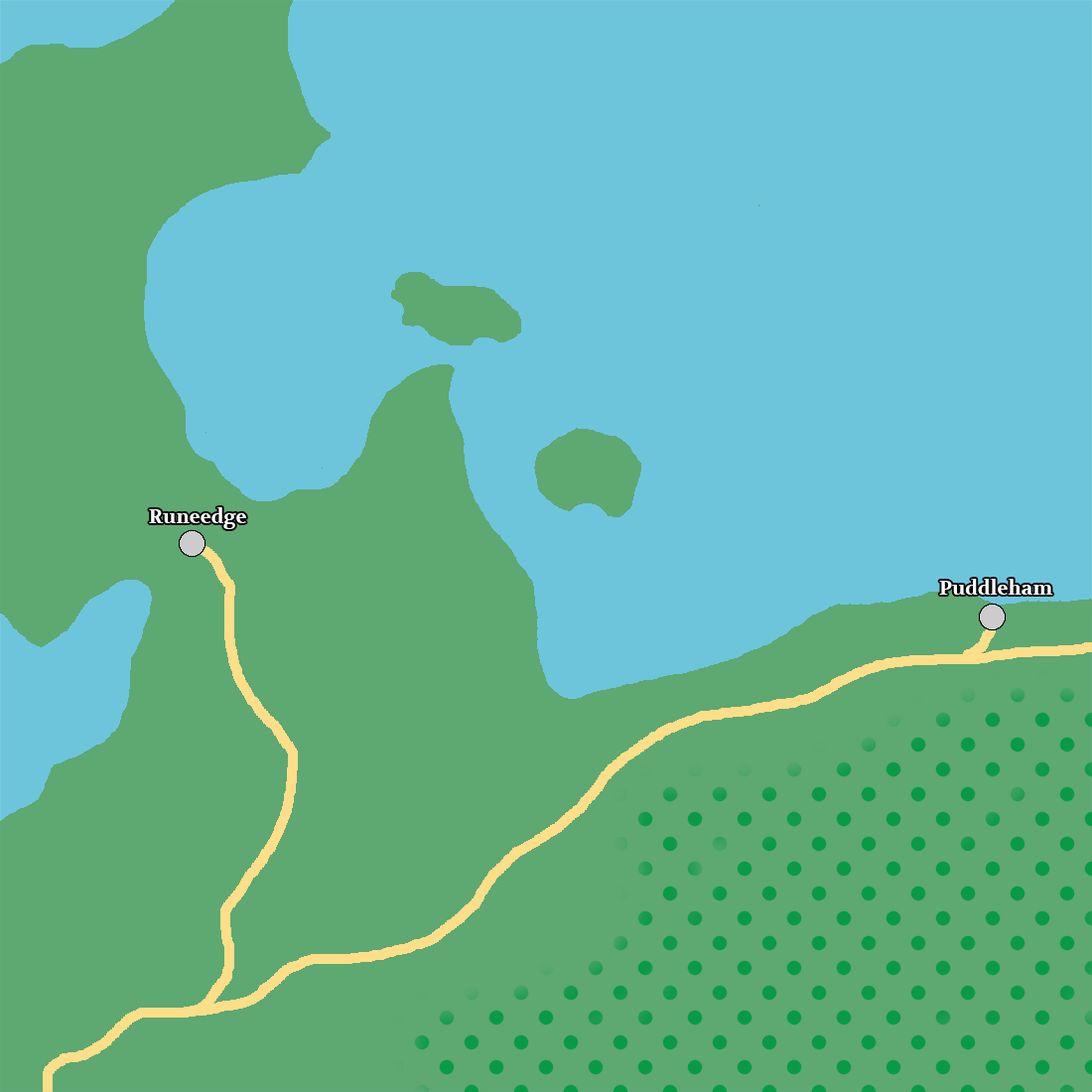
<style>
.page{position:relative;width:1092px;height:1092px;background:#5ea872}
.page>*{position:absolute;margin:0}
.t1{font:19.9px "Volkhov-Bold";color:#ffffff}
</style>
<div class="page">
<p class="t1" style="left:149px;top:507px;width:97px;height:22px">Runeedge</p>
<p class="t1" style="left:939px;top:579px;width:114px;height:16px">Puddleham</p>
</div>
